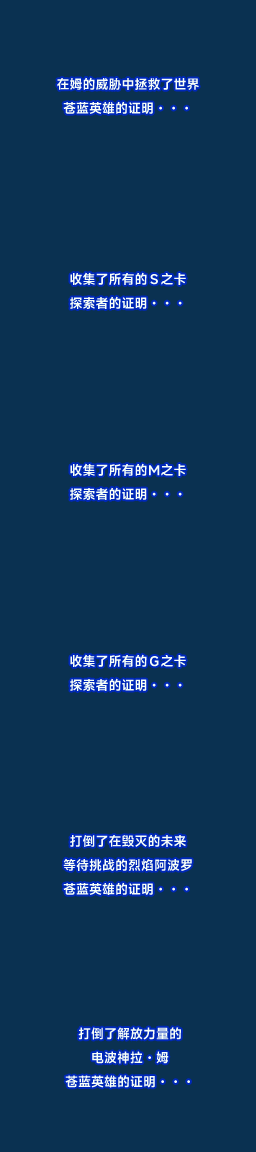
<style>
.page{position:relative;width:256px;height:1152px;background:#0a3151}
.page>*{position:absolute;margin:0}
.t1{font:13px/24px "MiSansVF-Semibold";color:#f7fff7}
.t2{font:13px/24px "KozGoPr6N-Regular";color:#f7fff7}
</style>
<div class="page">
<p class="t1" style="left:57px;top:77px;width:142px;height:37px;text-align:center">在姆的威胁中拯救了世界<br>苍蓝英雄的证明<span class="t2">・・・</span></p>
<p class="t1" style="left:70px;top:272px;width:116px;height:37px;text-align:center">收集了所有的Ｓ之卡<br>探索者的证明<span class="t2">・・・</span></p>
<p class="t1" style="left:70px;top:463px;width:116px;height:37px;text-align:center">收集了所有的Ｍ之卡<br>探索者的证明<span class="t2">・・・</span></p>
<p class="t1" style="left:70px;top:654px;width:116px;height:37px;text-align:center">收集了所有的Ｇ之卡<br>探索者的证明<span class="t2">・・・</span></p>
<p class="t1" style="left:63px;top:834px;width:129px;height:61px;text-align:center">打倒了在毁灭的未来<br>等待挑战的烈焰阿波罗<br>苍蓝英雄的证明<span class="t2">・・・</span></p>
<p class="t1" style="left:65px;top:1027px;width:125px;height:61px;text-align:center">打倒了解放力量的<br>电波神拉<span class="t2">・</span>姆<br>苍蓝英雄的证明<span class="t2">・・・</span></p>
</div>
